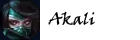
<style>
.page{position:relative;width:140px;height:40px;background:#ffffff}
.page>*{position:absolute;margin:0}
.t1{font:16px "VinerHandITC";color:#000000}
</style>
<div class="page">
<p class="t1" style="left:48px;top:11px;width:47px;height:15px">Akali</p>
</div>
